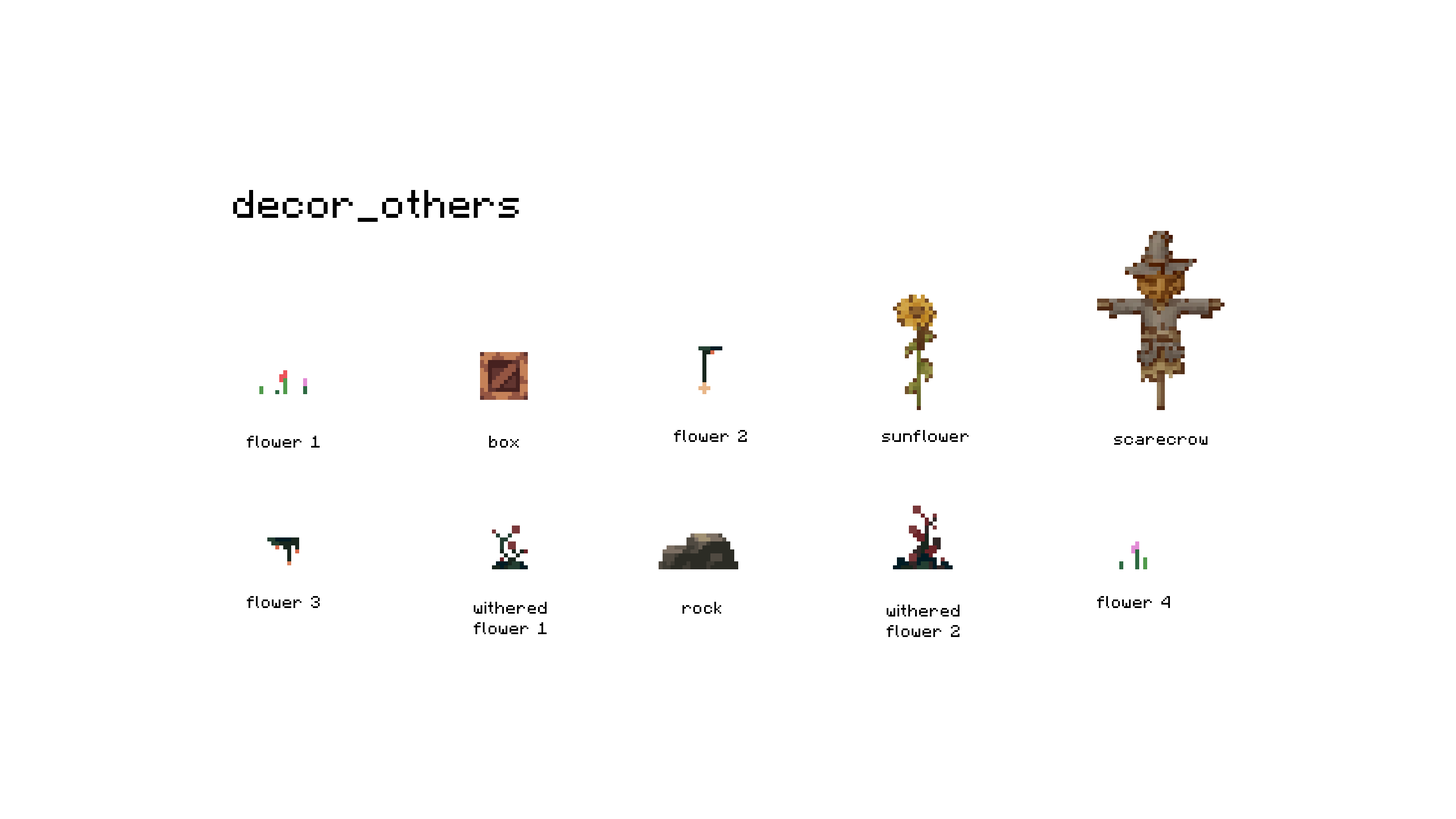
<style>
.page{position:relative;width:1456px;height:819px;background:#ffffff}
.page>*{position:absolute;margin:0}
.t1{font:39.8px "Minecraft-Regular";letter-spacing:0.025em;color:#000000}
.t2{font:17.1px "Minecraft-Regular";letter-spacing:0.025em;color:#000000}
</style>
<div class="page">
<p class="t1" style="left:233px;top:190px;width:286px;height:32px">decor_others</p>
<p class="t2" style="left:247px;top:436px;width:73px;height:12px">flower 1</p>
<p class="t2" style="left:489px;top:436px;width:30px;height:12px">box</p>
<p class="t2" style="left:674px;top:430px;width:73px;height:12px">flower 2</p>
<p class="t2" style="left:882px;top:430px;width:87px;height:12px">sunflower</p>
<p class="t2" style="left:1114px;top:436px;width:93px;height:9px">scarecrow</p>
<p class="t2" style="left:247px;top:596px;width:73px;height:12px">flower 3</p>
<p class="t2" style="left:474px;top:602px;width:73px;height:32px;text-align:center">withered<br>flower 1</p>
<p class="t2" style="left:682px;top:602px;width:39px;height:12px">rock</p>
<p class="t2" style="left:887px;top:605px;width:72px;height:32px;text-align:center">withered<br>flower 2</p>
<p class="t2" style="left:1097px;top:596px;width:73px;height:12px">flower 4</p>
</div>
